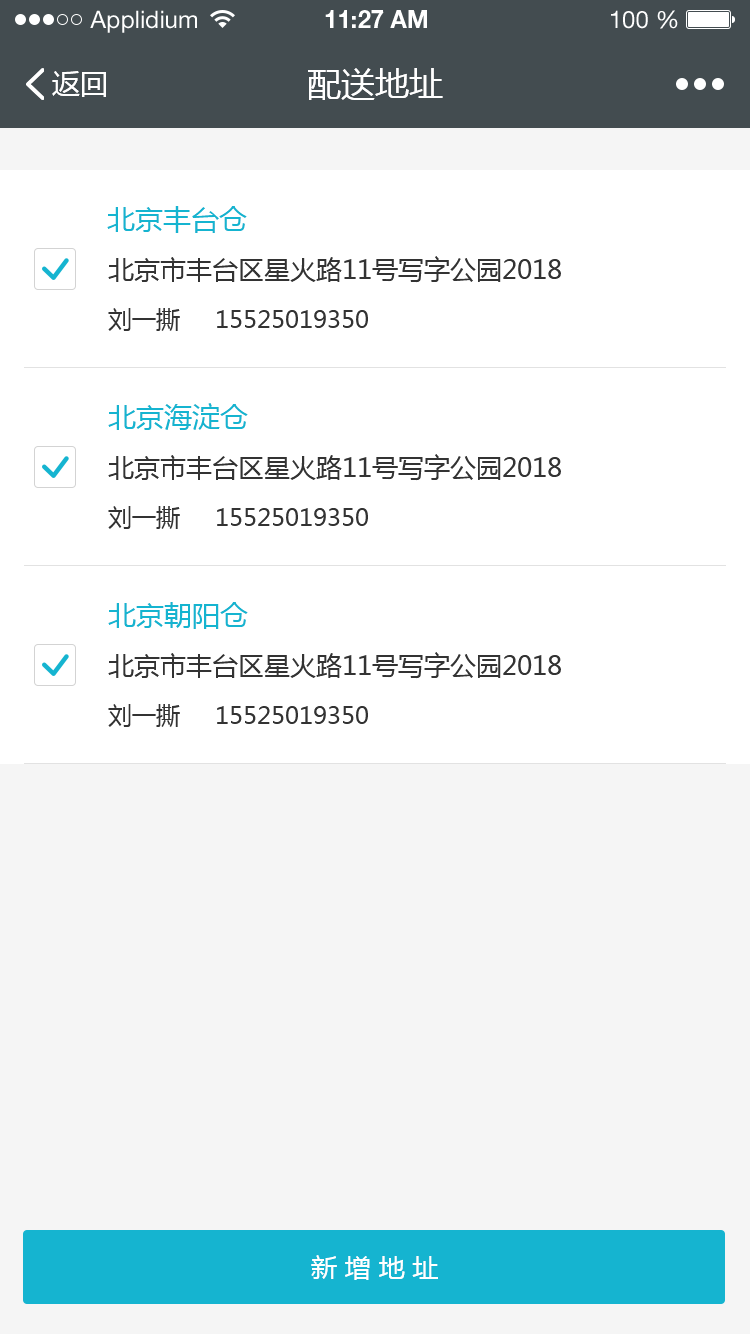
<style>
.page{position:relative;width:750px;height:1334px;background:#ffffff}
.page>*{position:absolute;margin:0}
.t1{font:24px "HelveticaNeueLTStd-Roman";color:#ffffff}
.t2{font:24px "HelveticaNeueLTStd-Bd";color:#ffffff}
.t3{font:28px "MicrosoftYaHei";color:#ffffff}
.t4{font:34px "MicrosoftYaHei";color:#ffffff}
.t5{font:28px "MicrosoftYaHei";color:#15b4d0}
.t6{font:26px "MicrosoftYaHei";color:#333333}
.t7{font:24px "MicrosoftYaHei";color:#333333}
.t8{font:26px "MicrosoftYaHei";letter-spacing:0.3em;color:#ffffff}
</style>
<div class="page">
<p class="t1" style="left:90px;top:10px;width:107px;height:23px">Applidium</p>
<p class="t2" style="left:325px;top:10px;width:102px;height:18px">11:27 AM</p>
<p class="t1" style="left:611px;top:10px;width:67px;height:19px">100 %</p>
<p class="t3" style="left:52px;top:71px;width:54px;height:26px">返回</p>
<p class="t4" style="left:308px;top:68px;width:135px;height:32px">配送地址</p>
<p class="t5" style="left:107px;top:206px;width:140px;height:27px">北京丰台仓</p>
<p class="t6" style="left:108px;top:256px;width:453px;height:27px">北京市丰台区星火路11号写字公园2018</p>
<p class="t7" style="left:108px;top:308px;width:260px;height:23px">刘一撕     15525019350</p>
<p class="t5" style="left:108px;top:403px;width:140px;height:27px">北京海淀仓</p>
<p class="t6" style="left:108px;top:454px;width:453px;height:27px">北京市丰台区星火路11号写字公园2018</p>
<p class="t7" style="left:108px;top:506px;width:260px;height:23px">刘一撕     15525019350</p>
<p class="t5" style="left:108px;top:602px;width:140px;height:27px">北京朝阳仓</p>
<p class="t6" style="left:108px;top:652px;width:453px;height:27px">北京市丰台区星火路11号写字公园2018</p>
<p class="t7" style="left:108px;top:704px;width:260px;height:23px">刘一撕     15525019350</p>
<p class="t8" style="left:311px;top:1255px;width:127px;height:25px">新增地址</p>
</div>
